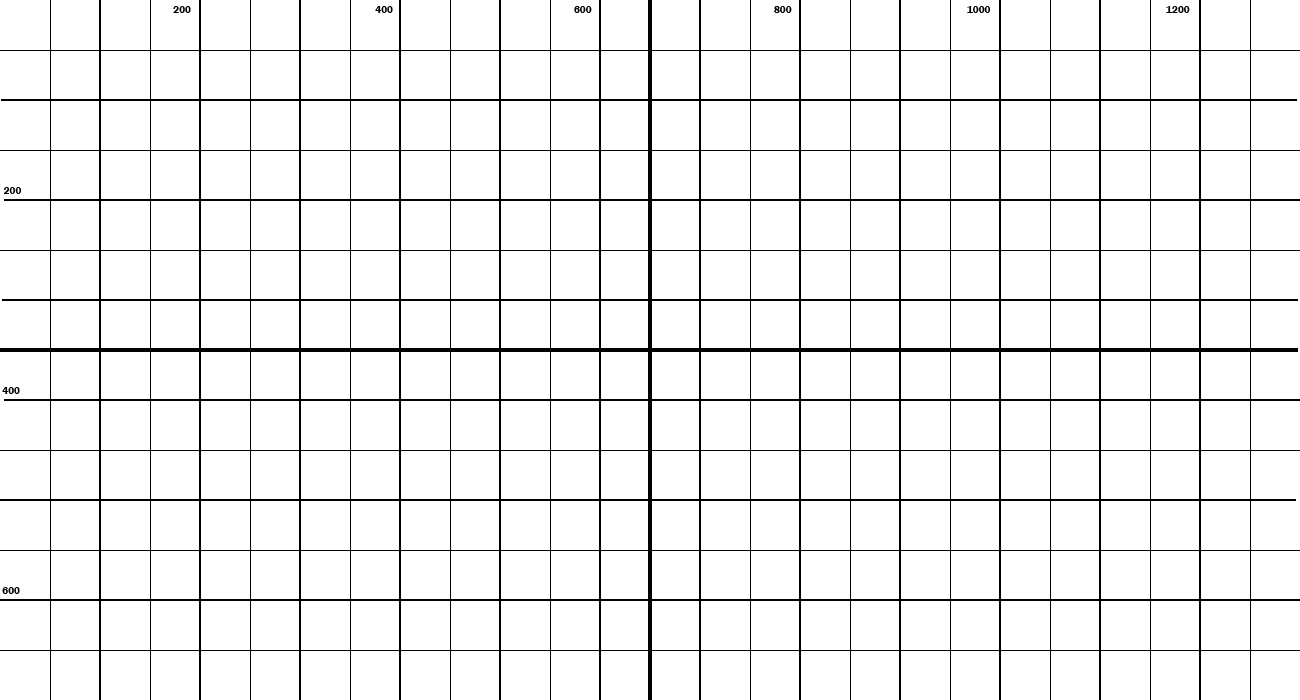
<style>
.page{position:relative;width:1300px;height:700px;background:#ffffff}
.page>*{position:absolute;margin:0}
.t1{font:10px "FranklinGothic-Demi";color:#000000}
</style>
<div class="page">
<p class="t1" style="left:173px;top:6px;width:18px;height:7px">200</p>
<p class="t1" style="left:375px;top:6px;width:18px;height:7px">400</p>
<p class="t1" style="left:574px;top:6px;width:18px;height:7px">600</p>
<p class="t1" style="left:774px;top:6px;width:18px;height:7px">800</p>
<p class="t1" style="left:967px;top:6px;width:24px;height:7px">1000</p>
<p class="t1" style="left:1166px;top:6px;width:24px;height:7px">1200</p>
<p class="t1" style="left:3px;top:187px;width:19px;height:7px">200</p>
<p class="t1" style="left:2px;top:387px;width:18px;height:7px">400</p>
<p class="t1" style="left:2px;top:587px;width:18px;height:7px">600</p>
</div>
